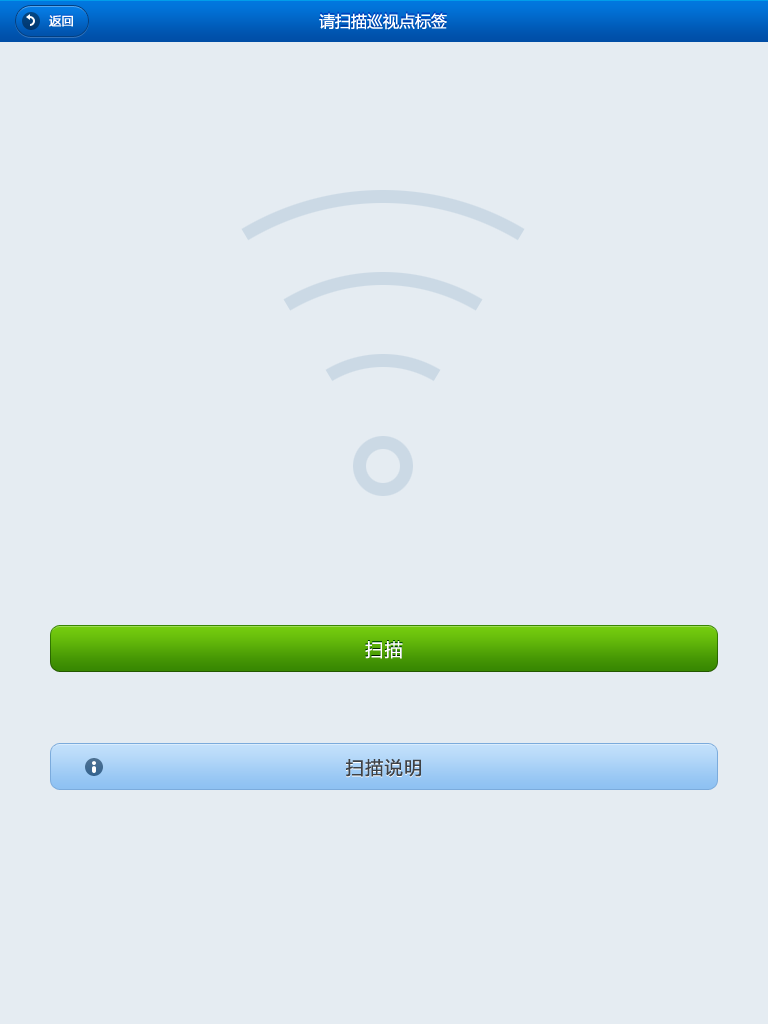
<style>
.page{position:relative;width:768px;height:1024px;background:#e5ecf2}
.page>*{position:absolute;margin:0}
.t1{font:12px "MicrosoftYaHei";color:#ffffff;font-weight:bold}
.t2{font:16px "MicrosoftYaHei";color:#ffffff}
.t3{font:18px "MicrosoftYaHei";letter-spacing:0.08em;color:#ffffff}
.t4{font:18px "MicrosoftYaHei";letter-spacing:0.08em;color:#3e4145}
</style>
<div class="page">
<p class="t1" style="left:49px;top:15px;width:24px;height:12px">返回</p>
<p class="t2" style="left:319px;top:13px;width:128px;height:17px">请扫描巡视点标签</p>
<p class="t3" style="left:365px;top:641px;width:38px;height:18px">扫描</p>
<p class="t4" style="left:346px;top:758px;width:75px;height:19px">扫描说明</p>
</div>
